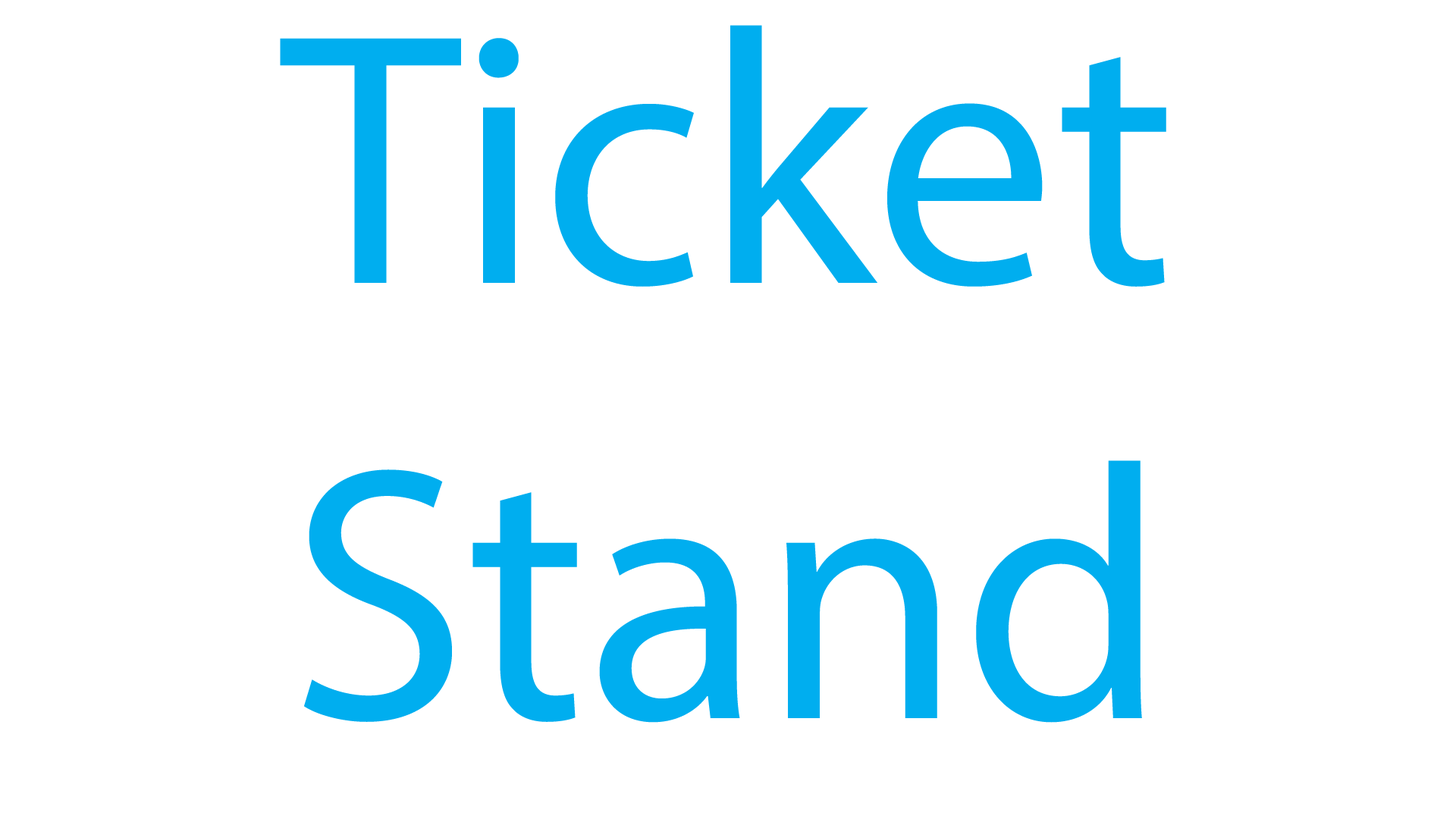
<style>
.page{position:relative;width:1456px;height:819px;background:#ffffff}
.page>*{position:absolute;margin:0}
.t1{font:362.5px "MyriadPro-Regular";color:#00aeef}
</style>
<div class="page">
<p class="t1" style="left:280px;top:25px;width:886px;height:698px;text-align:center">Ticket Stand</p>
</div>
